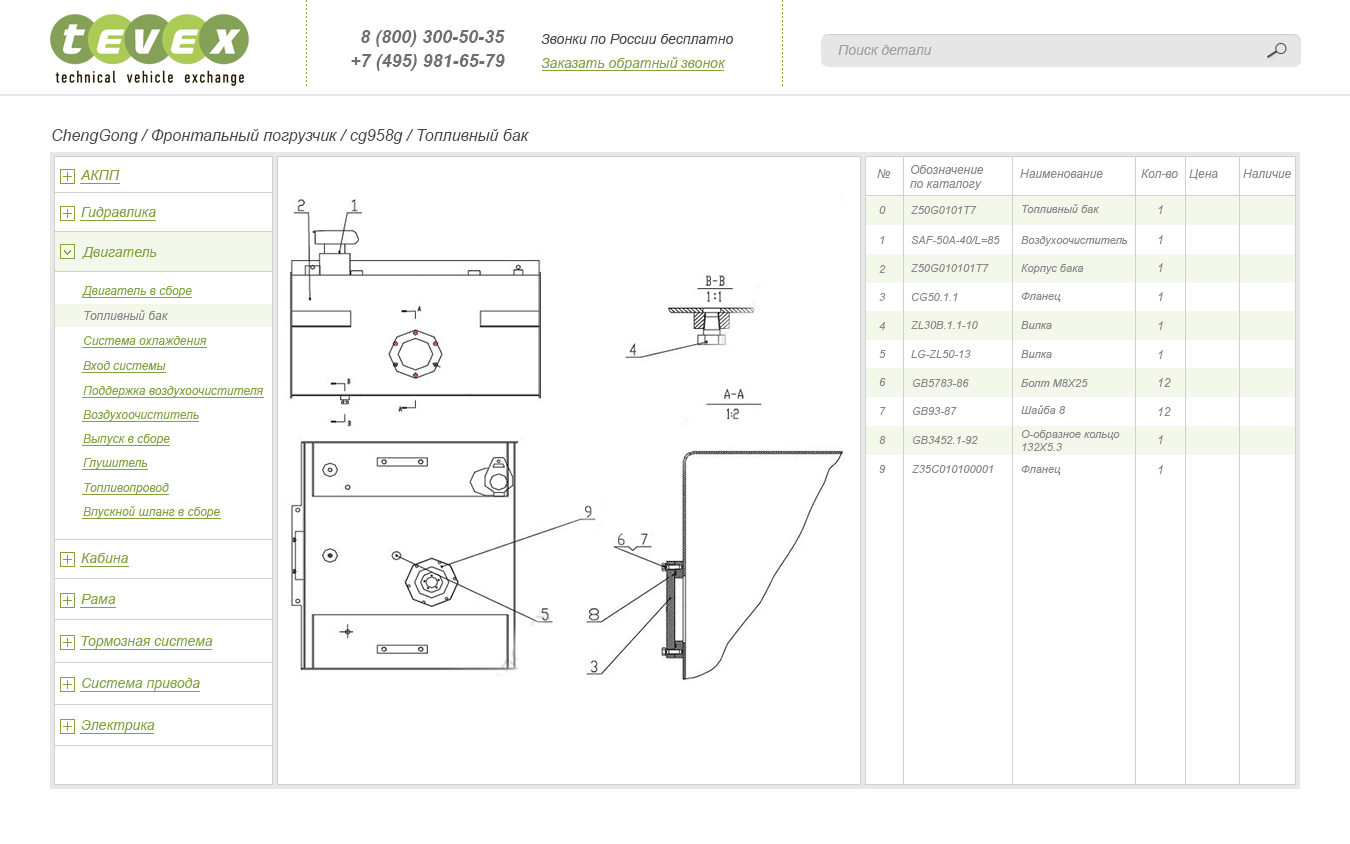
<style>
.page{position:relative;width:1350px;height:844px;background:#ffffff}
.page>*{position:absolute;margin:0}
.t1{font:18px "Arial-BoldItalicMT";color:#6f6f6f}
.t2{font:14px "Arial-ItalicMT";color:#484848}
.t3{font:14px "Arial-ItalicMT";color:#a0a0a0}
.t4{font:14px "Arial-ItalicMT";color:#83a43c}
.t5{font:16px "Arial-ItalicMT";color:#484848}
.t6{font:12px "Arial-ItalicMT";color:#888888}
.t7{font:11px "Arial-ItalicMT";color:#888888}
.t8{font:12px "Arial-ItalicMT";color:#83a43c}
</style>
<div class="page">
<p class="t1" style="left:361px;top:30px;width:144px;height:17px">8 (800) 300-50-35</p>
<p class="t2" style="left:541px;top:34px;width:193px;height:10px">Звонки по России бесплатно</p>
<p class="t1" style="left:351px;top:54px;width:154px;height:17px">+7 (495) 981-65-79</p>
<p class="t3" style="left:838px;top:45px;width:94px;height:10px">Поиск детали</p>
<p class="t4" style="left:541px;top:57px;width:185px;height:14px">Заказать обратный звонок</p>
<p class="t5" style="left:52px;top:129px;width:477px;height:15px">ChengGong / Фронтальный погрузчик / cg958g / Топливный бак</p>
<p class="t4" style="left:80px;top:170px;width:40px;height:10px">АКПП</p>
<p class="t6" style="left:877px;top:169px;width:14px;height:9px">№</p>
<p class="t6" style="left:910px;top:165px;width:74px;height:25px">Обозначение <br>по каталогу</p>
<p class="t6" style="left:1020px;top:169px;width:83px;height:9px">Наименование</p>
<p class="t6" style="left:1141px;top:169px;width:37px;height:9px">Кол-во</p>
<p class="t6" style="left:1189px;top:169px;width:29px;height:11px">Цена</p>
<p class="t6" style="left:1243px;top:169px;width:48px;height:9px">Наличие</p>
<p class="t4" style="left:81px;top:207px;width:75px;height:13px">Гидравлика</p>
<p class="t7" style="left:879px;top:206px;width:7px;height:8px">0</p>
<p class="t7" style="left:911px;top:206px;width:66px;height:8px">Z50G0101T7</p>
<p class="t7" style="left:1022px;top:204px;width:78px;height:9px">Топливный бак</p>
<p class="t6" style="left:1158px;top:205px;width:5px;height:9px">1</p>
<p class="t7" style="left:880px;top:236px;width:5px;height:8px">1</p>
<p class="t7" style="left:911px;top:236px;width:89px;height:8px">SAF-50A-40/L=85</p>
<p class="t7" style="left:1021px;top:236px;width:106px;height:10px">Воздухоочиститель</p>
<p class="t6" style="left:1158px;top:235px;width:5px;height:9px">1</p>
<p class="t4" style="left:82px;top:247px;width:75px;height:12px">Двигатель</p>
<p class="t7" style="left:879px;top:265px;width:7px;height:8px">2</p>
<p class="t7" style="left:911px;top:264px;width:78px;height:8px">Z50G010101T7</p>
<p class="t7" style="left:1021px;top:264px;width:63px;height:10px">Корпус бака</p>
<p class="t6" style="left:1158px;top:263px;width:5px;height:9px">1</p>
<p class="t8" style="left:82px;top:286px;width:110px;height:11px">Двигатель в сборе</p>
<p class="t7" style="left:879px;top:293px;width:7px;height:8px">3</p>
<p class="t7" style="left:911px;top:293px;width:47px;height:8px">CG50.1.1</p>
<p class="t7" style="left:1021px;top:292px;width:40px;height:10px">Фланец</p>
<p class="t6" style="left:1158px;top:292px;width:5px;height:9px">1</p>
<p class="t6" style="left:84px;top:310px;width:85px;height:10px">Топливный бак</p>
<p class="t7" style="left:879px;top:322px;width:6px;height:8px">4</p>
<p class="t7" style="left:911px;top:321px;width:67px;height:8px">ZL30B.1.1-10</p>
<p class="t7" style="left:1021px;top:321px;width:31px;height:8px">Вилка</p>
<p class="t6" style="left:1158px;top:321px;width:5px;height:9px">1</p>
<p class="t8" style="left:84px;top:336px;width:123px;height:9px">Система охлаждения</p>
<p class="t7" style="left:879px;top:350px;width:7px;height:8px">5</p>
<p class="t7" style="left:911px;top:350px;width:60px;height:8px">LG-ZL50-13</p>
<p class="t7" style="left:1021px;top:350px;width:31px;height:8px">Вилка</p>
<p class="t6" style="left:1158px;top:350px;width:5px;height:9px">1</p>
<p class="t8" style="left:83px;top:361px;width:83px;height:9px">Вход системы</p>
<p class="t8" style="left:83px;top:386px;width:181px;height:11px">Поддержка воздухоочистителя</p>
<p class="t7" style="left:879px;top:378px;width:7px;height:8px">6</p>
<p class="t7" style="left:913px;top:379px;width:56px;height:8px">GB5783-86</p>
<p class="t7" style="left:1021px;top:379px;width:67px;height:8px">Болт М8Х25</p>
<p class="t6" style="left:1158px;top:378px;width:13px;height:9px">12</p>
<p class="t8" style="left:83px;top:410px;width:116px;height:11px">Воздухоочиститель</p>
<p class="t7" style="left:880px;top:407px;width:6px;height:8px">7</p>
<p class="t7" style="left:913px;top:407px;width:44px;height:8px">GB93-87</p>
<p class="t7" style="left:1021px;top:405px;width:44px;height:9px">Шайба 8</p>
<p class="t6" style="left:1158px;top:407px;width:13px;height:9px">12</p>
<p class="t8" style="left:83px;top:434px;width:87px;height:11px">Выпуск в сборе</p>
<p class="t7" style="left:879px;top:436px;width:7px;height:8px">8</p>
<p class="t7" style="left:913px;top:436px;width:65px;height:8px">GB3452.1-92</p>
<p class="t7" style="left:1021px;top:430px;width:99px;height:21px">О-образное кольцо <br>132Х5.3</p>
<p class="t6" style="left:1158px;top:435px;width:5px;height:9px">1</p>
<p class="t8" style="left:83px;top:458px;width:65px;height:11px">Глушитель</p>
<p class="t7" style="left:879px;top:465px;width:7px;height:8px">9</p>
<p class="t7" style="left:912px;top:465px;width:82px;height:8px">Z35C010100001</p>
<p class="t7" style="left:1021px;top:465px;width:40px;height:10px">Фланец</p>
<p class="t6" style="left:1158px;top:465px;width:5px;height:9px">1</p>
<p class="t8" style="left:84px;top:483px;width:85px;height:11px">Топливопровод</p>
<p class="t8" style="left:83px;top:506px;width:137px;height:12px">Впускной шланг в сборе</p>
<p class="t4" style="left:81px;top:553px;width:47px;height:10px">Кабина</p>
<p class="t4" style="left:81px;top:594px;width:35px;height:10px">Рама</p>
<p class="t4" style="left:81px;top:636px;width:132px;height:13px">Тормозная система</p>
<p class="t4" style="left:82px;top:678px;width:118px;height:13px">Система привода</p>
<p class="t4" style="left:81px;top:720px;width:74px;height:13px">Электрика</p>
</div>
